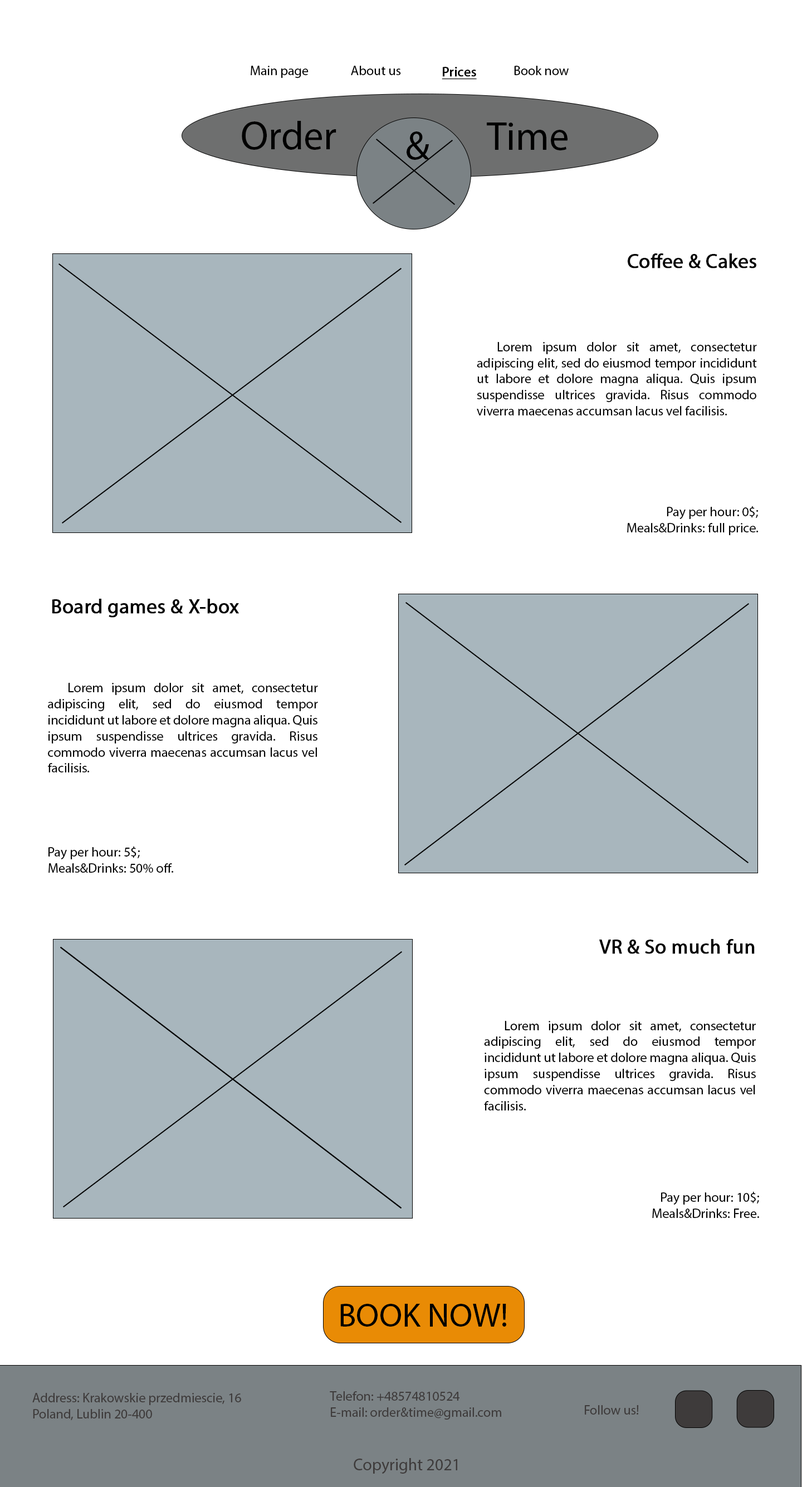
<style>
.page{position:relative;width:802px;height:1487px;background:#ffffff}
.page>*{position:absolute;margin:0}
.t1{font:13.4px "MyriadPro-Regular";color:#000000}
.t2{font:13.4px "MyriadPro-Regular";color:#000000;font-weight:bold;text-decoration:underline}
.t3{font:40.1px "MyriadPro-Regular";color:#000000}
.t4{font:20px "MyriadPro-Regular";color:#030303;font-weight:bold}
.t5{font:13.4px "MyriadPro-Regular";color:#030303}
.t6{font:13.4px "MyriadPro-Regular";color:#020202}
.t7{font:33.4px "MyriadPro-Regular";color:#000000}
.t8{font:13.4px "MyriadPro-Regular";color:#3e3b3b}
.t9{font:16.7px "MyriadPro-Regular";color:#3e3b3b}
</style>
<div class="page">
<p class="t1" style="left:251px;top:66px;width:58px;height:12px">Main page</p>
<p class="t1" style="left:351px;top:66px;width:50px;height:9px">About us</p>
<p class="t1" style="left:514px;top:66px;width:55px;height:9px">Book now</p>
<p class="t2" style="left:442px;top:67px;width:35px;height:13px">Prices</p>
<p class="t3" style="left:242px;top:121px;width:94px;height:29px">Order</p>
<p class="t3" style="left:487px;top:123px;width:80px;height:27px">Time</p>
<p class="t3" style="left:407px;top:131px;width:22px;height:29px">&amp;</p>
<p class="t4" style="left:628px;top:253px;width:128px;height:15px">Coffee &amp; Cakes</p>
<p class="t5" style="left:477px;top:342px;width:280px;height:73px;text-align:justify">Lorem ipsum dolor sit amet, consectetur adipiscing elit, sed do eiusmod tempor incididunt ut labore et dolore magna aliqua. Quis ipsum suspendisse ultrices gravida. Risus commodo viverra maecenas accumsan lacus vel facilisis.</p>
<p class="t5" style="left:627px;top:506px;width:132px;height:29px;text-align:right">Pay per hour: 0$;<br>Meals&amp;Drinks: full price.</p>
<p class="t4" style="left:52px;top:599px;width:187px;height:19px">Board games &amp; X-box</p>
<p class="t5" style="left:48px;top:683px;width:270px;height:89px;text-align:justify">Lorem ipsum dolor sit amet, consectetur adipiscing elit, sed do eiusmod tempor incididunt ut labore et dolore magna aliqua. Quis ipsum suspendisse ultrices gravida. Risus commodo viverra maecenas accumsan lacus vel facilisis.</p>
<p class="t5" style="left:48px;top:846px;width:126px;height:27px;text-align:justify">Pay per hour: 5$;<br>Meals&amp;Drinks: 50% off.</p>
<p class="t4" style="left:599px;top:939px;width:156px;height:15px">VR &amp; So much fun</p>
<p class="t1" style="left:484px;top:1021px;width:272px;height:89px;text-align:justify">Lorem ipsum dolor sit amet, consectetur adipiscing elit, sed do eiusmod tempor incididunt ut labore et dolore magna aliqua. Quis ipsum suspendisse ultrices gravida. Risus commodo viverra maecenas accumsan lacus vel facilisis.</p>
<p class="t6" style="left:652px;top:1191px;width:107px;height:27px;text-align:right">Pay per hour: 10$;<br>Meals&amp;Drinks: Free.</p>
<p class="t7" style="left:340px;top:1304px;width:166px;height:23px">BOOK NOW!</p>
<p class="t8" style="left:32px;top:1393px;width:209px;height:27px;text-align:justify">Address: Krakowskie przedmiescie, 16<br>Poland, Lublin 20-400</p>
<p class="t8" style="left:330px;top:1391px;width:171px;height:29px;text-align:justify">Telefon: +48574810524<br>E-mail: order&amp;time@gmail.com</p>
<p class="t8" style="left:585px;top:1405px;width:54px;height:10px">Follow us!</p>
<p class="t9" style="left:354px;top:1458px;width:103px;height:16px">Copyright 2021</p>
</div>
